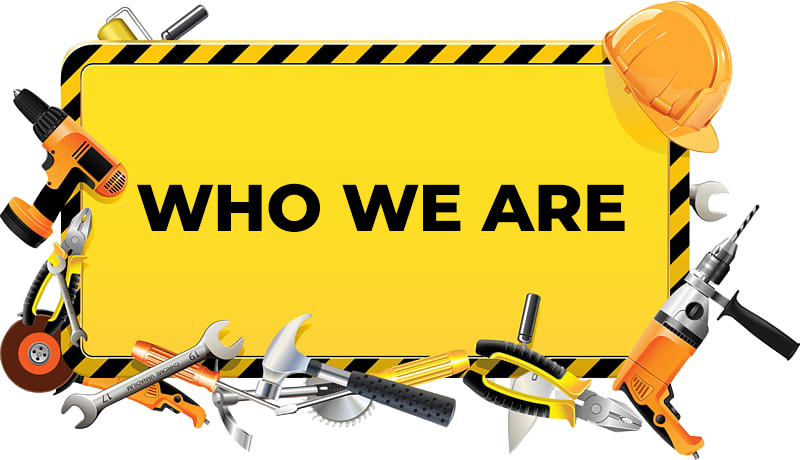
<style>
.page{position:relative;width:800px;height:460px;background:#ffffff}
.page>*{position:absolute;margin:0}
.t1{font:66px "Montserrat-ExtraBold";color:#000000}
</style>
<div class="page">
<p class="t1" style="left:137px;top:183px;width:488px;height:49px">WHO WE ARE</p>
</div>
